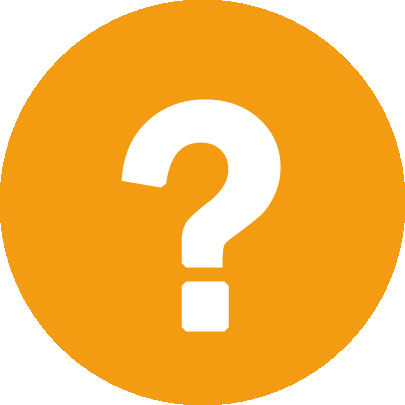
<style>
.page{position:relative;width:405px;height:405px;background:#f39c12}
.page>*{position:absolute;margin:0}
.t1{font:330px "FranklinGothic-Medium";color:#ffffff;font-weight:bold}
</style>
<div class="page">
<p class="t1" style="left:121px;top:99px;width:160px;height:233px">?</p>
</div>
